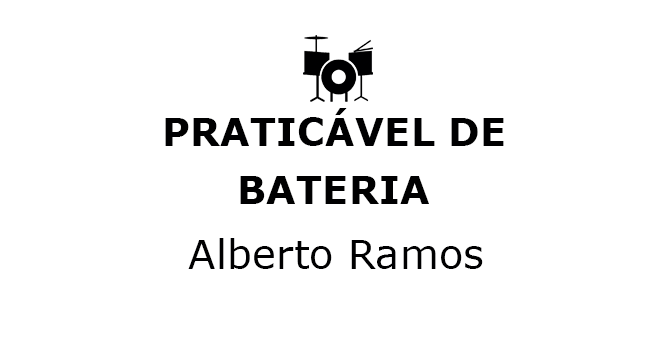
<style>
.page{position:relative;width:650px;height:350px;background:#ffffff}
.page>*{position:absolute;margin:0}
.t1{font:38.5px "Verdana-Bold";color:#000001}
.t2{font:40.3px "Verdana";color:#000001}
</style>
<div class="page">
<p class="t1" style="left:165px;top:108px;width:339px;height:38px">PRATICÁVEL DE</p>
<p class="t1" style="left:240px;top:176px;width:189px;height:28px">BATERIA</p>
<p class="t2" style="left:188px;top:238px;width:295px;height:31px">Alberto Ramos</p>
</div>
